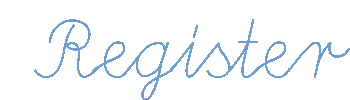
<style>
.page{position:relative;width:350px;height:100px;background:#ffffff}
.page>*{position:absolute;margin:0}
.t1{font:78.6px "DeutscheNormalschrift";color:#709ecc}
</style>
<div class="page">
<p class="t1" style="left:34px;top:19px;width:316px;height:82px">Register</p>
</div>
